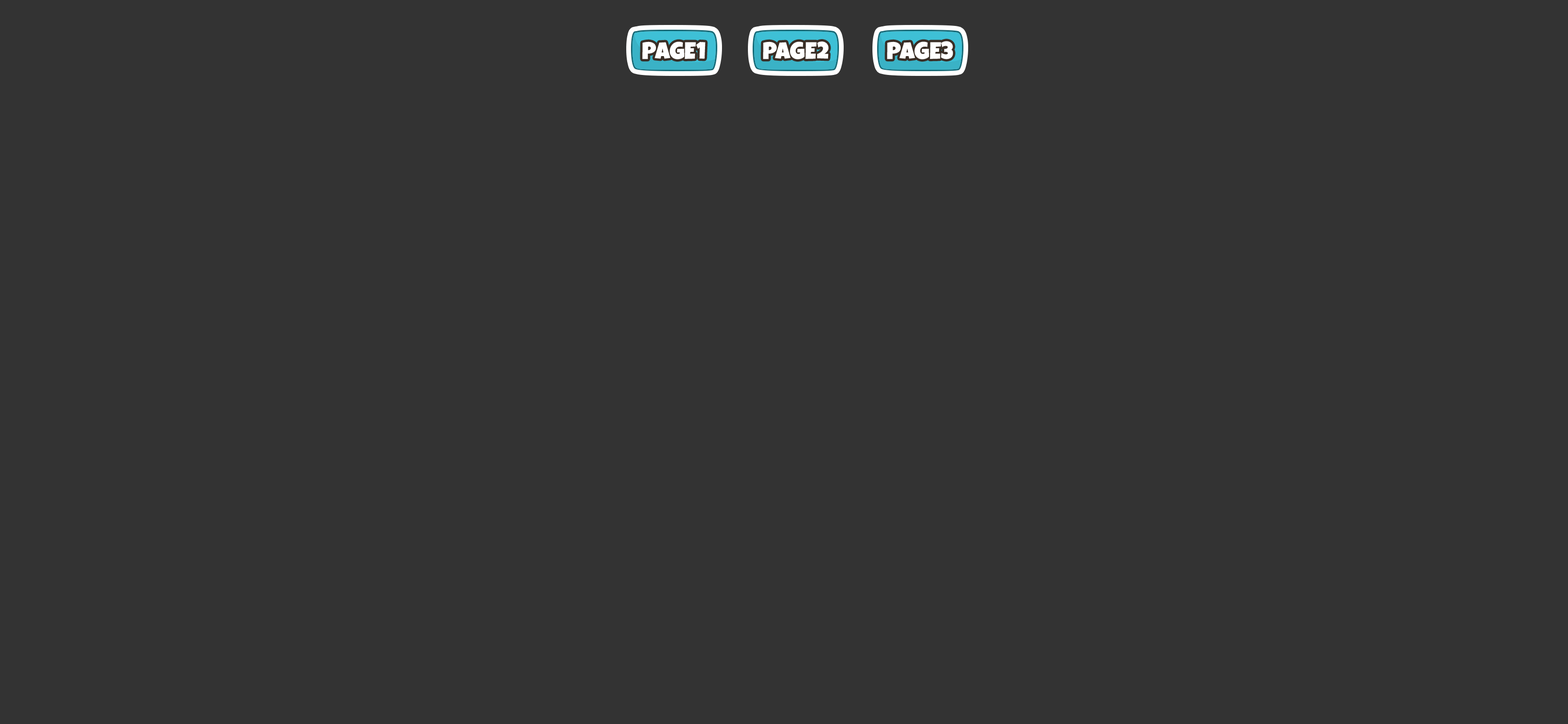
<style>
.page{position:relative;width:1568px;height:724px;background:#333333}
.page>*{position:absolute;margin:0}
.t1{font:23.8px "LuckiestGuy-Regular";color:#ffffff;text-transform:uppercase}
</style>
<div class="page">
<p class="t1" style="left:642px;top:41px;width:63px;height:18px">Page1</p>
<p class="t1" style="left:763px;top:41px;width:66px;height:18px">Page2</p>
<p class="t1" style="left:887px;top:41px;width:66px;height:18px">Page3</p>
</div>
